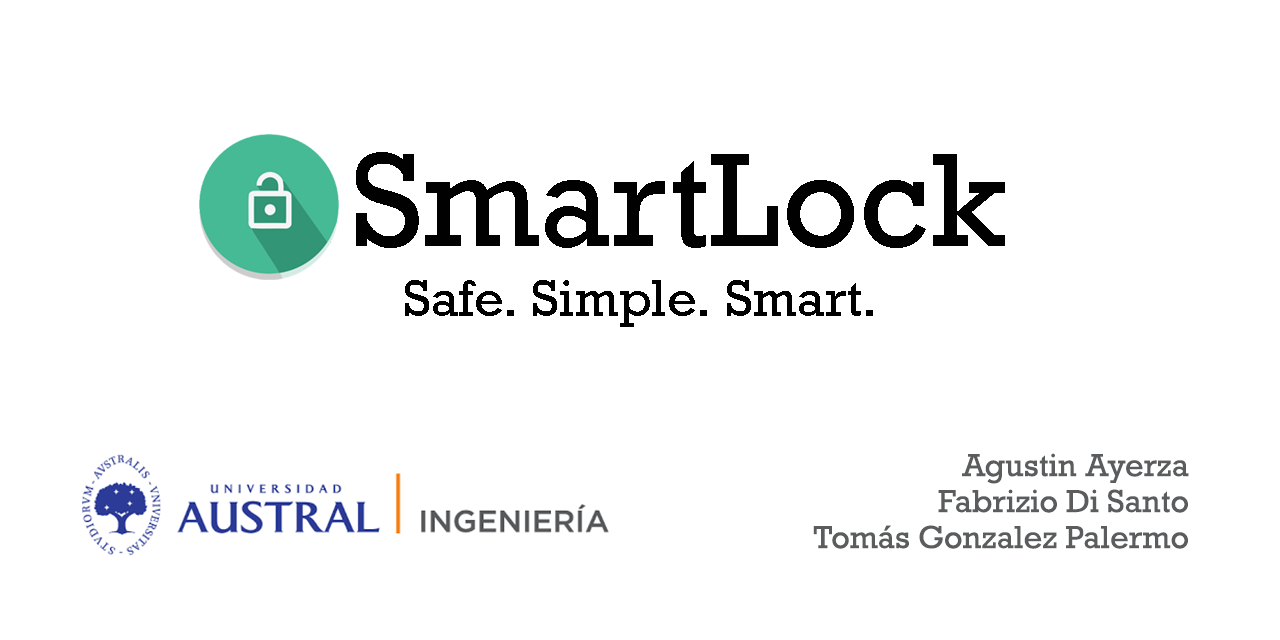
<style>
.page{position:relative;width:1280px;height:640px;background:#ffffff}
.page>*{position:absolute;margin:0}
.t1{font:125px "Rockwell-Regular";color:#010101}
.t2{font:48px "Rockwell-Regular";color:#000000}
.t3{font:30px/36px "Rockwell-Regular";color:#5b5c5e}
</style>
<div class="page">
<p class="t1" style="left:356px;top:152px;width:649px;height:96px">SmartLock</p>
<p class="t2" style="left:405px;top:280px;width:468px;height:47px">Safe. Simple. Smart.</p>
<p class="t3" style="left:813px;top:453px;width:376px;height:96px;text-align:right">Agustin Ayerza<br>Fabrizio Di Santo<br>Tomás Gonzalez Palermo</p>
</div>
